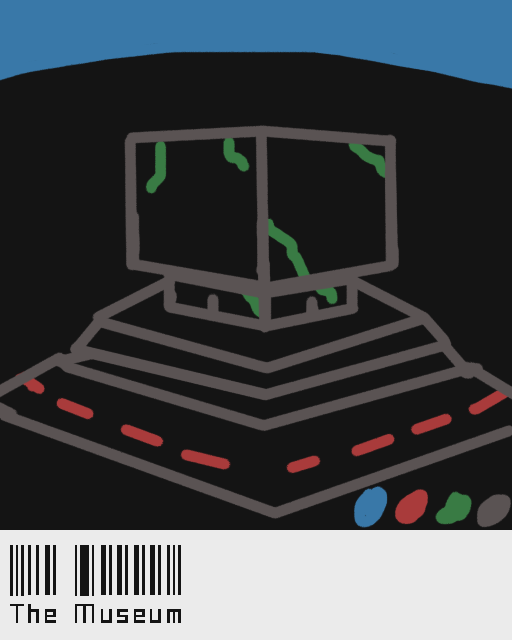
<style>
.page{position:relative;width:512px;height:640px;background:#141414}
.page>*{position:absolute;margin:0}
.t1{font:72px "Paskowy";color:#141414}
</style>
<div class="page">
<p class="t1" style="left:10px;top:545px;width:171px;height:78px">The Museum</p>
</div>
